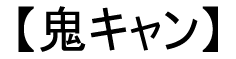
<style>
.page{position:relative;width:236px;height:59px;background:#ffffff}
.page>*{position:absolute;margin:0}
.t1{font:50px "MS-UIGothic";color:#000000}
</style>
<div class="page">
<p class="t1" style="left:18px;top:6px;width:200px;height:46px">【鬼キャン】</p>
</div>
